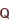
<style>
.page{position:relative;width:9px;height:20px;background:#ffffff}
.page>*{position:absolute;margin:0}
.t1{font:12.6px "Arial-BoldMT";letter-spacing:0.025em;color:#6d312c}
</style>
<div class="page">
<p class="t1" style="left:0px;top:8px;width:10px;height:11px">Q</p>
</div>
